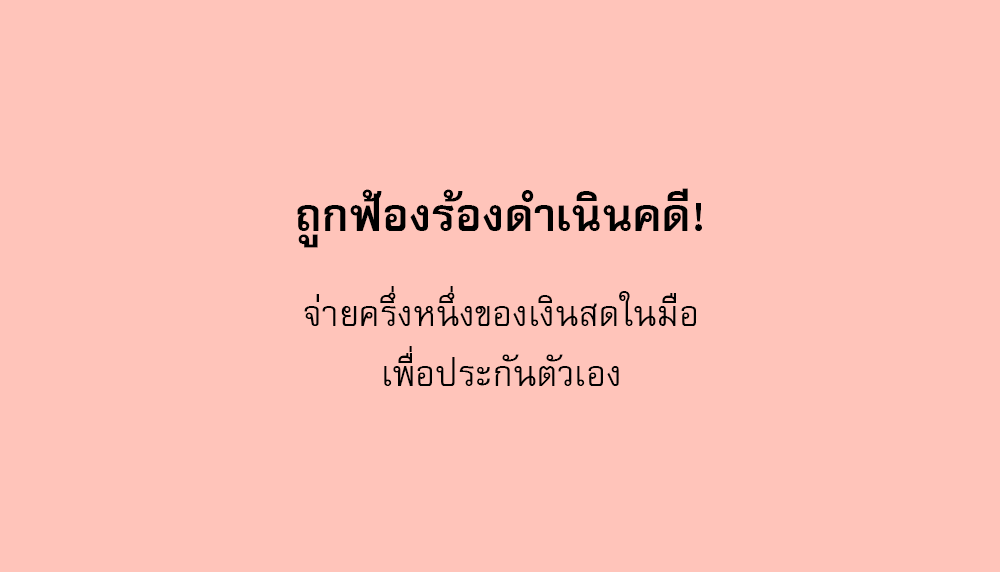
<style>
.page{position:relative;width:1000px;height:572px;background:#ffc4ba}
.page>*{position:absolute;margin:0}
.t1{font:64px "FreesiaUPCBold";color:#000000}
.t2{font:50px/60px "FreesiaUPC";color:#000000}
</style>
<div class="page">
<p class="t1" style="left:297px;top:188px;width:405px;height:60px">ถูกฟ้องร้องดำเนินคดี!</p>
<p class="t2" style="left:304px;top:286px;width:392px;height:100px;text-align:center">จ่ายครึ่งหนึ่งของเงินสดในมือ<br>เพื่อประกันตัวเอง</p>
</div>
